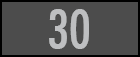
<style>
.page{position:relative;width:140px;height:57px;background:#4c4c4c}
.page>*{position:absolute;margin:0}
.t1{font:53.3px "FuturaCondensed";color:#bebfc1}
</style>
<div class="page">
<p class="t1" style="left:49px;top:9px;width:40px;height:40px">30</p>
</div>
